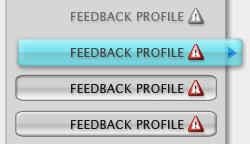
<style>
.page{position:relative;width:250px;height:144px;background:#d6d6d6}
.page>*{position:absolute;margin:0}
.t1{font:12.3px "LucidaSans";letter-spacing:0.006em;color:#6b6b6b}
.t2{font:12.3px "LucidaSans";letter-spacing:0.006em;color:#454545}
.t3{font:12.3px "LucidaSans";letter-spacing:0.006em;color:#191919}
</style>
<div class="page">
<p class="t1" style="left:71px;top:12px;width:113px;height:9px">FEEDBACK PROFILE</p>
<p class="t2" style="left:71px;top:48px;width:113px;height:9px">FEEDBACK PROFILE</p>
<p class="t3" style="left:71px;top:84px;width:113px;height:9px">FEEDBACK PROFILE</p>
<p class="t3" style="left:71px;top:120px;width:113px;height:9px">FEEDBACK PROFILE</p>
</div>
